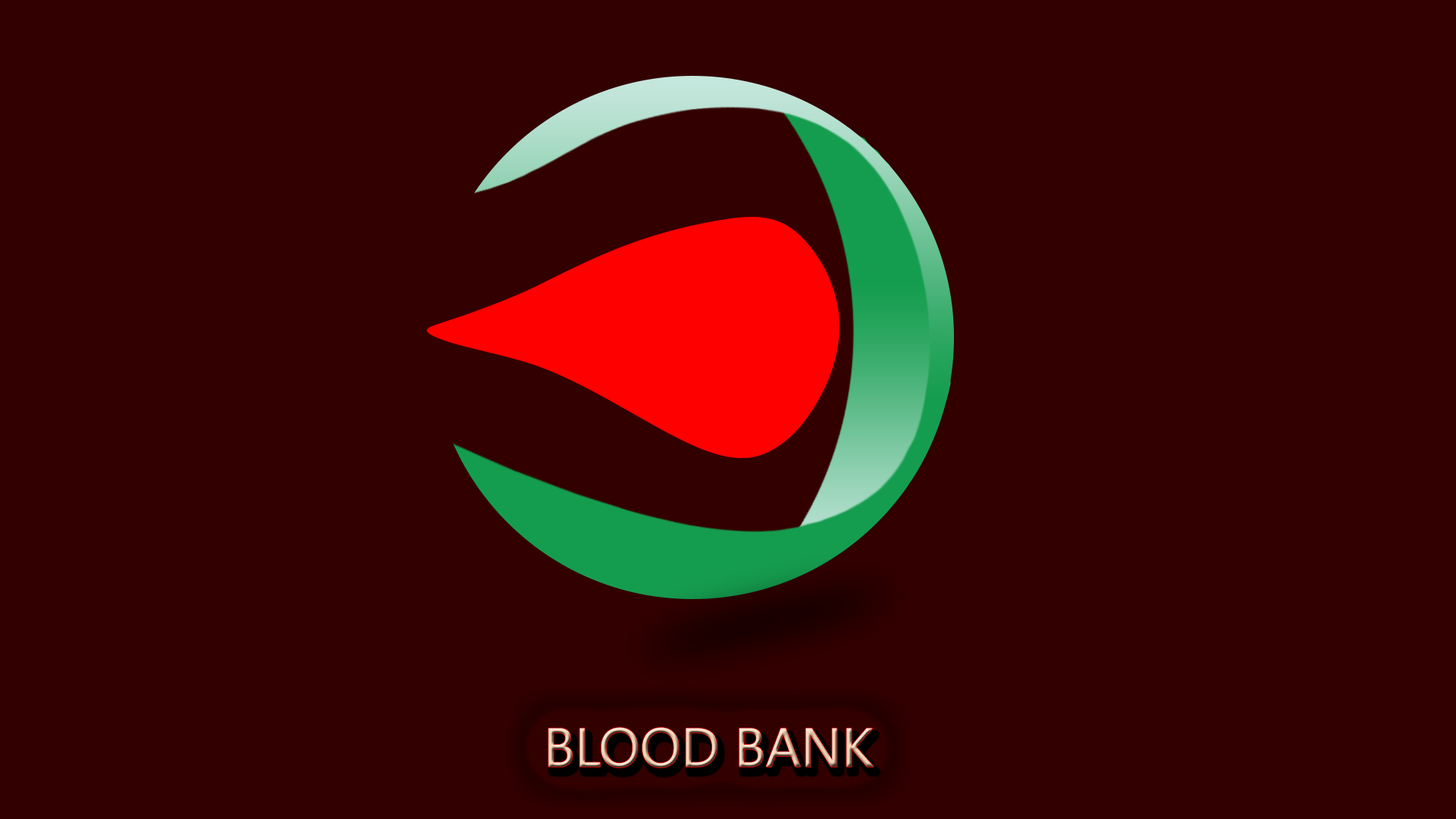
<style>
.page{position:relative;width:1456px;height:819px;background:#330000}
.page>*{position:absolute;margin:0}
.t1{font:54.6px "LeelawadeeUI";text-transform:uppercase}
</style>
<div class="page">
<p class="t1" style="left:548px;top:727px;width:326px;height:40px">Blood bank</p>
</div>
